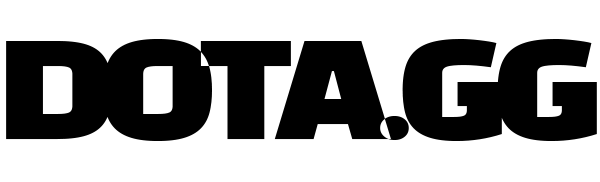
<style>
.page{position:relative;width:600px;height:182px;background:#ffffff}
.page>*{position:absolute;margin:0}
.t1{font:65.1px "BlackHanSans-Regular";letter-spacing:-0.1em;color:#000000;scale:1.18 1}
</style>
<div class="page">
<p class="t1" style="left:6px;top:39px;width:591px;height:102px">DOTA.GG</p>
</div>
